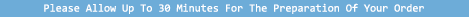
<style>
.page{position:relative;width:469px;height:17px;background:#6dacd8}
.page>*{position:absolute;margin:0}
.t1{font:11px "Consolas";color:#ffffff}
</style>
<div class="page">
<p class="t1" style="left:44px;top:3px;width:380px;height:11px">Please Allow Up To 30 Minutes For The Preparation Of Your Order</p>
</div>
